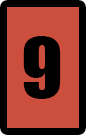
<style>
.page{position:relative;width:86px;height:135px;background:#cb4f3c}
.page>*{position:absolute;margin:0}
.t1{font:76.7px "Impact";letter-spacing:0.5em;color:#000000}
</style>
<div class="page">
<p class="t1" style="left:23px;top:36px;width:38px;height:63px">9</p>
</div>
